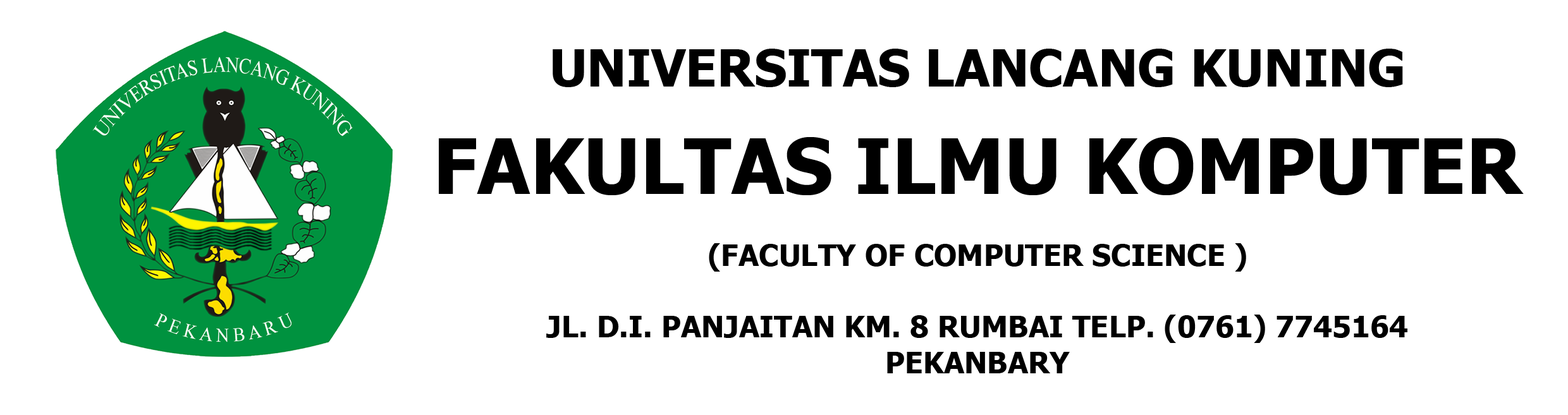
<style>
.page{position:relative;width:1568px;height:415px;background:#ffffff}
.page>*{position:absolute;margin:0}
.t1{font:29.8px "Tahoma-Bold";color:#000000}
.t2{font:51.2px "Tahoma-Bold";color:#000000}
.t3{font:76.8px "Tahoma-Bold";color:#000000}
</style>
<div class="page">
<p class="t1" style="left:439px;top:49px;width:1085px;height:325px;text-align:center"><span class="t2">UNIVERSITAS LANCANG KUNING<br><br></span><span class="t3">FAKULTAS ILMU KOMPUTER<br></span><br>(FACULTY OF COMPUTER SCIENCE )<br><br>JL. D.I. PANJAITAN KM. 8 RUMBAI TELP. (0761) 7745164<br>PEKANBARY</p>
</div>
